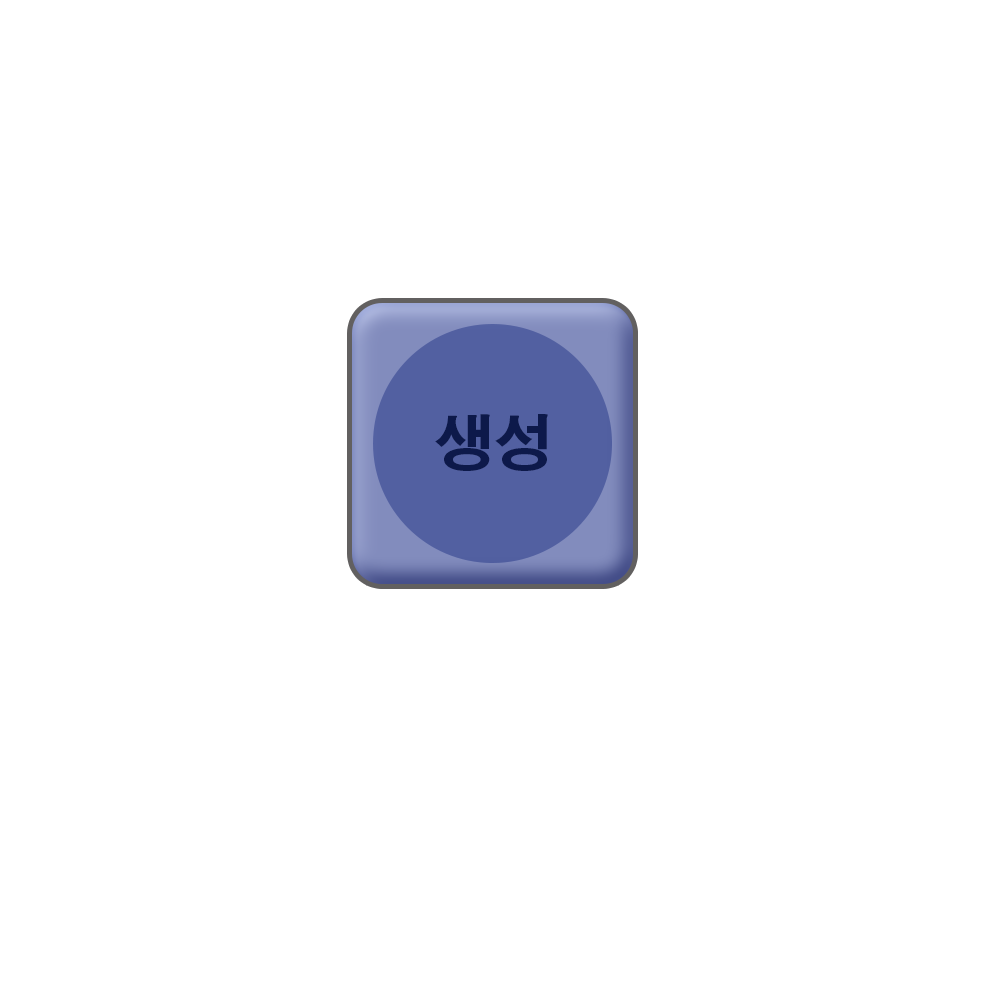
<style>
.page{position:relative;width:1000px;height:1000px;background:#ffffff}
.page>*{position:absolute;margin:0}
.t1{font:60px "AdobeGothicStd-Bold";color:#0d194a}
</style>
<div class="page">
<p class="t1" style="left:435px;top:414px;width:113px;height:57px">생성</p>
</div>
